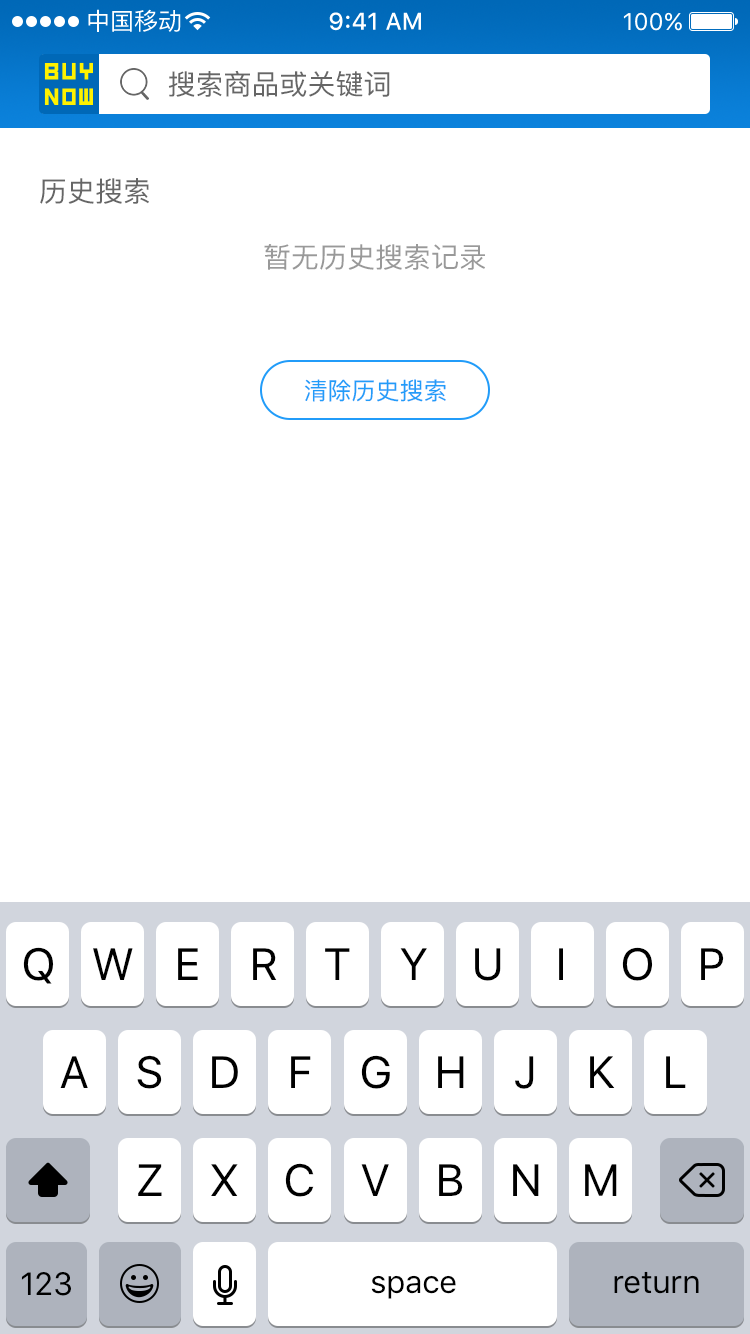
<style>
.page{position:relative;width:750px;height:1334px;background:#ffffff}
.page>*{position:absolute;margin:0}
.t1{font:28px "PingFang-SC-Medium";color:#666666}
.t2{font:28px "PingFang-SC-Medium";color:#999999}
.t3{font:24px "PingFang-SC-Medium";color:#219cf9}
</style>
<div class="page">
<p class="t1" style="left:168px;top:70px;width:222px;height:27px">搜索商品或关键词</p>
<p class="t1" style="left:40px;top:178px;width:109px;height:26px">历史搜索</p>
<p class="t2" style="left:264px;top:244px;width:221px;height:26px">暂无历史搜索记录</p>
<p class="t3" style="left:304px;top:379px;width:142px;height:23px">清除历史搜索</p>
</div>
